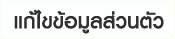
<style>
.page{position:relative;width:175px;height:39px;background:#fdffff}
.page>*{position:absolute;margin:0}
.t1{font:30.2px "KittithadaMedium65";color:#30302f}
</style>
<div class="page">
<p class="t1" style="left:14px;top:9px;width:150px;height:25px">แก้ไขข้อมูลส่วนตัว</p>
</div>
